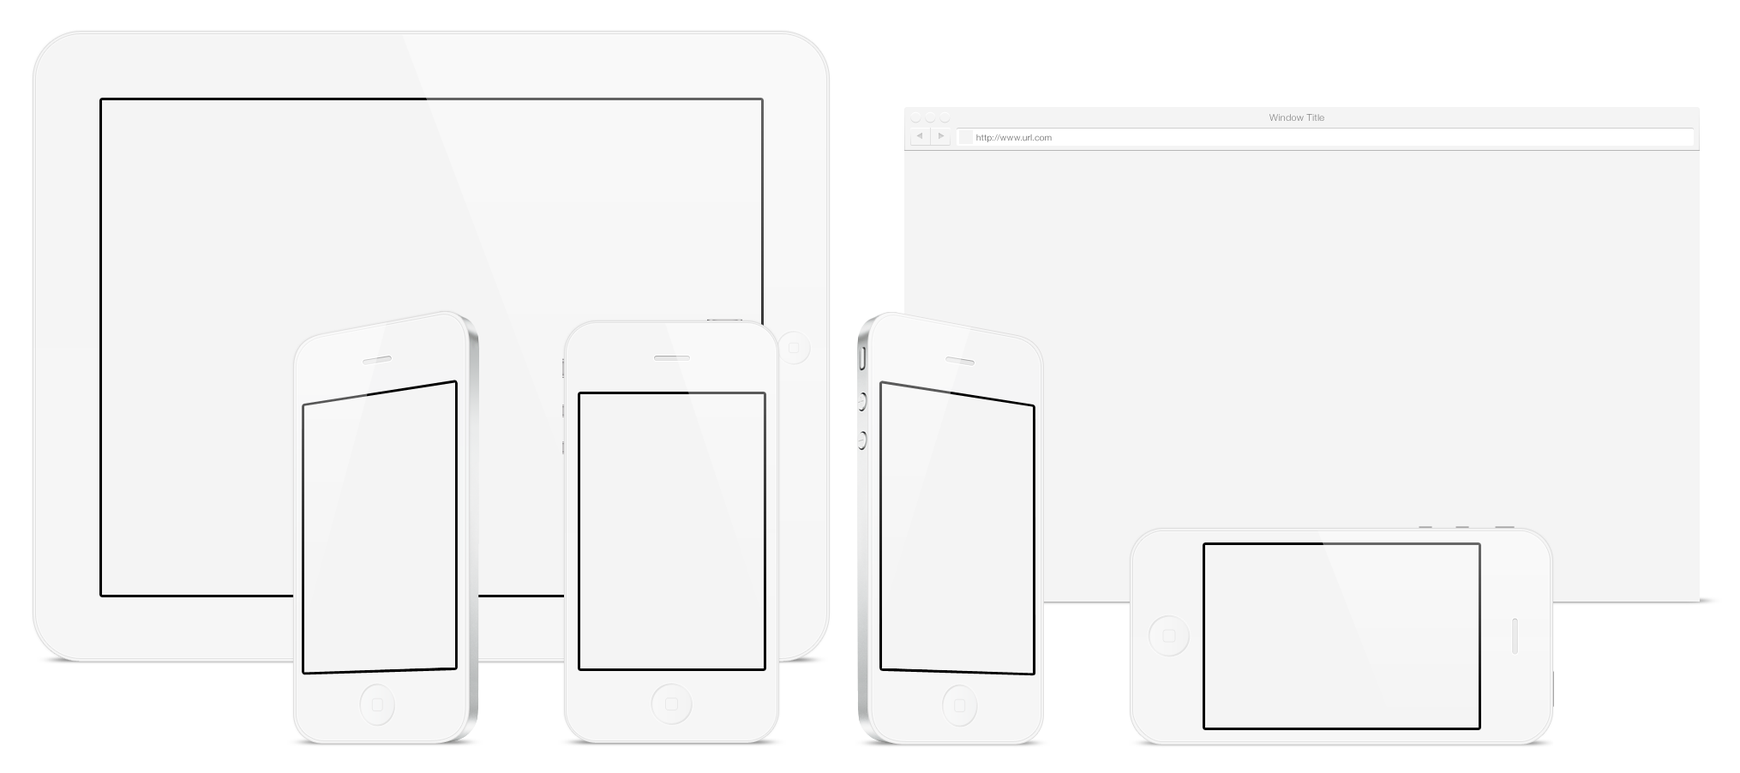
<style>
.page{position:relative;width:1740px;height:773px;background:#f4f4f4}
.page>*{position:absolute;margin:0}
.t1{font:9.4px "HelveticaNeue-Light";letter-spacing:0.025em;color:#828282}
.t2{font:8.6px "HelveticaNeue-Light";letter-spacing:0.03em;color:#696969}
</style>
<div class="page">
<p class="t1" style="left:1269px;top:114px;width:55px;height:7px">Window Title</p>
<p class="t2" style="left:976px;top:134px;width:76px;height:8px">http://www.url.com</p>
</div>
